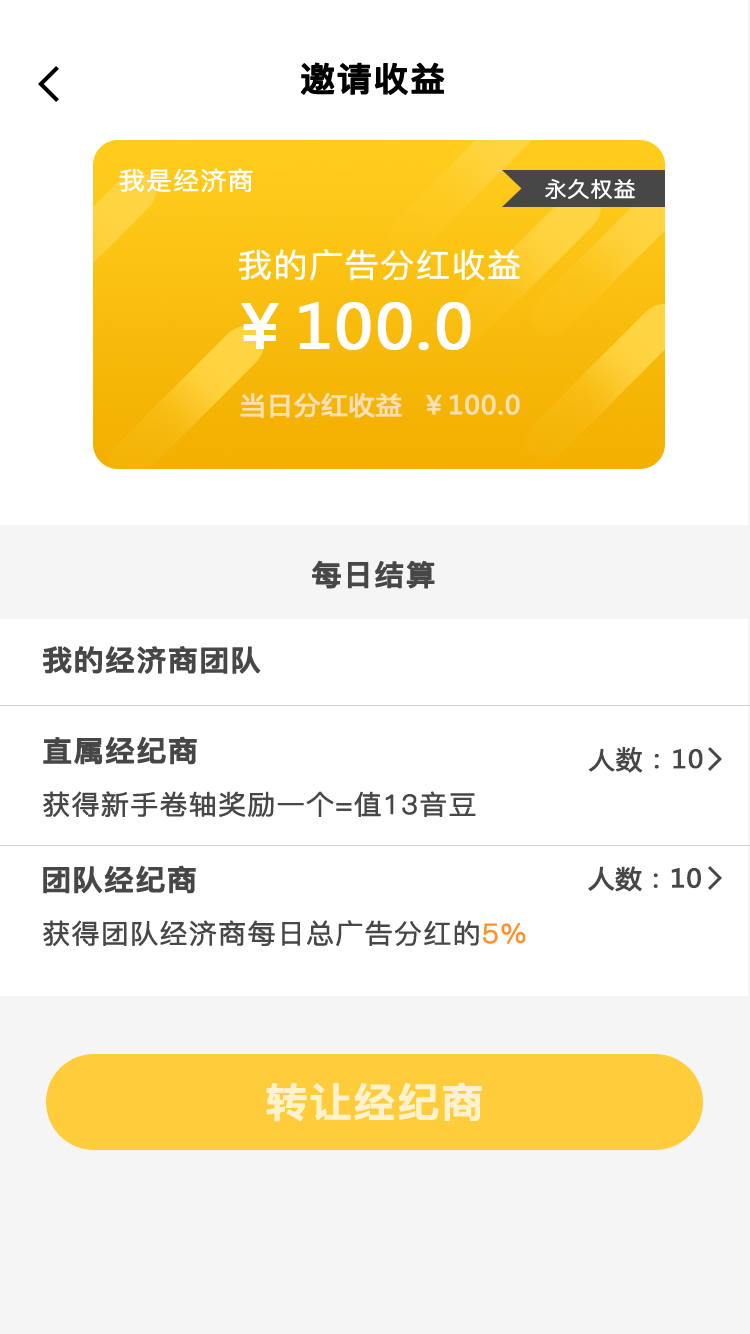
<style>
.page{position:relative;width:750px;height:1334px;background:#ffffff}
.page>*{position:absolute;margin:0}
.t1{font:33.3px "PingFang-SC-Bold";letter-spacing:0.02em;color:#000000;font-weight:bold;scale:1.05 1}
.t2{font:24.7px "PingFang-SC-Regular";letter-spacing:0.02em;color:#ffffff;font-weight:bold;scale:1.05 1}
.t3{font:20.9px "PingFang-SC-Regular";letter-spacing:0.02em;color:#ffffff;font-weight:bold;scale:1.05 1}
.t4{font:32.3px "PingFang-SC-Regular";letter-spacing:0.02em;color:#ffffff;font-weight:bold;scale:1.05 1}
.t5{font:60.3px "MicrosoftYaHei";letter-spacing:0.02em;color:#ffffff;font-weight:bold;scale:1.05 1}
.t6{font:24.7px "MicrosoftYaHei";letter-spacing:0.02em;color:#fbe1b2;font-weight:bold;scale:1.05 1}
.t7{font:28.5px "PingFang-SC-Bold";letter-spacing:0.02em;color:#474747;font-weight:bold;scale:1.05 1}
.t8{font:24.7px "MicrosoftYaHei";letter-spacing:0.02em;color:#474747;font-weight:bold;scale:1.05 1}
.t9{font:26.6px "PingFang-SC-Regular";letter-spacing:0.02em;color:#474747;font-weight:bold;scale:1.05 1}
.t10{font:26.6px "PingFang-SC-Regular";letter-spacing:0.02em;color:#ff9126;font-weight:bold;scale:1.05 1}
.t11{font:39.9px "PingFang-SC-Bold";letter-spacing:0.02em;color:#fff3cf;font-weight:bold;scale:1.05 1}
</style>
<div class="page">
<p class="t1" style="left:300px;top:62px;width:145px;height:33px">邀请收益</p>
<p class="t2" style="left:119px;top:168px;width:134px;height:25px">我是经济商</p>
<p class="t3" style="left:545px;top:179px;width:90px;height:20px">永久权益</p>
<p class="t4" style="left:239px;top:249px;width:281px;height:32px">我的广告分红收益</p>
<p class="t5" style="left:241px;top:302px;width:230px;height:48px">￥100.0</p>
<p class="t6" style="left:240px;top:392px;width:280px;height:26px">当日分红收益  ￥100.0</p>
<p class="t7" style="left:312px;top:560px;width:123px;height:29px">每日结算</p>
<p class="t7" style="left:43px;top:646px;width:218px;height:28px">我的经济商团队</p>
<p class="t7" style="left:43px;top:736px;width:154px;height:29px">直属经纪商</p>
<p class="t8" style="left:588px;top:747px;width:115px;height:26px">人数：10</p>
<p class="t9" style="left:43px;top:791px;width:433px;height:26px">获得新手卷轴奖励一个=值13音豆</p>
<p class="t7" style="left:43px;top:865px;width:153px;height:29px">团队经纪商</p>
<p class="t8" style="left:588px;top:866px;width:113px;height:26px">人数：10</p>
<p class="t9" style="left:43px;top:920px;width:483px;height:27px">获得团队经济商每日总广告分红的<span class="t10">5%</span></p>
<p class="t11" style="left:266px;top:1082px;width:216px;height:40px">转让经纪商</p>
</div>
